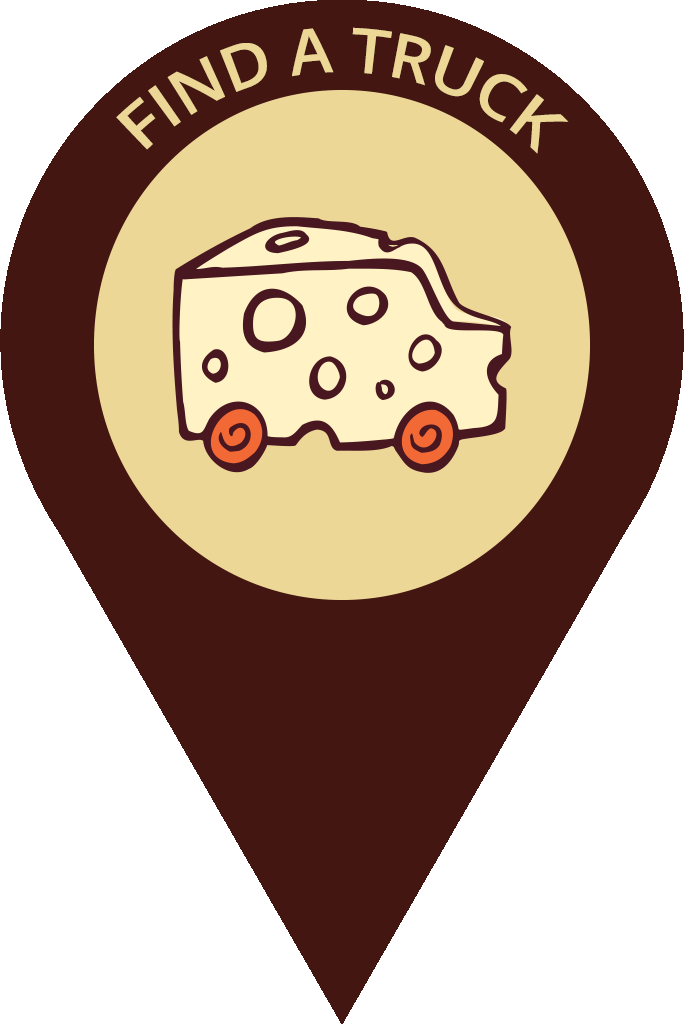
<style>
.page{position:relative;width:684px;height:1024px;background:#ffffff}
.page>*{position:absolute;margin:0}
.t1{font:61.9px/120.8px "OpenSans-Semibold";letter-spacing:0.01em;color:#ecd797;text-transform:uppercase;scale:0.87 1}
</style>
<div class="page">
<p class="t1" style="left:116px;top:27px;width:453px;height:127px;text-align:center">FIND A TRUCK</p>
</div>
